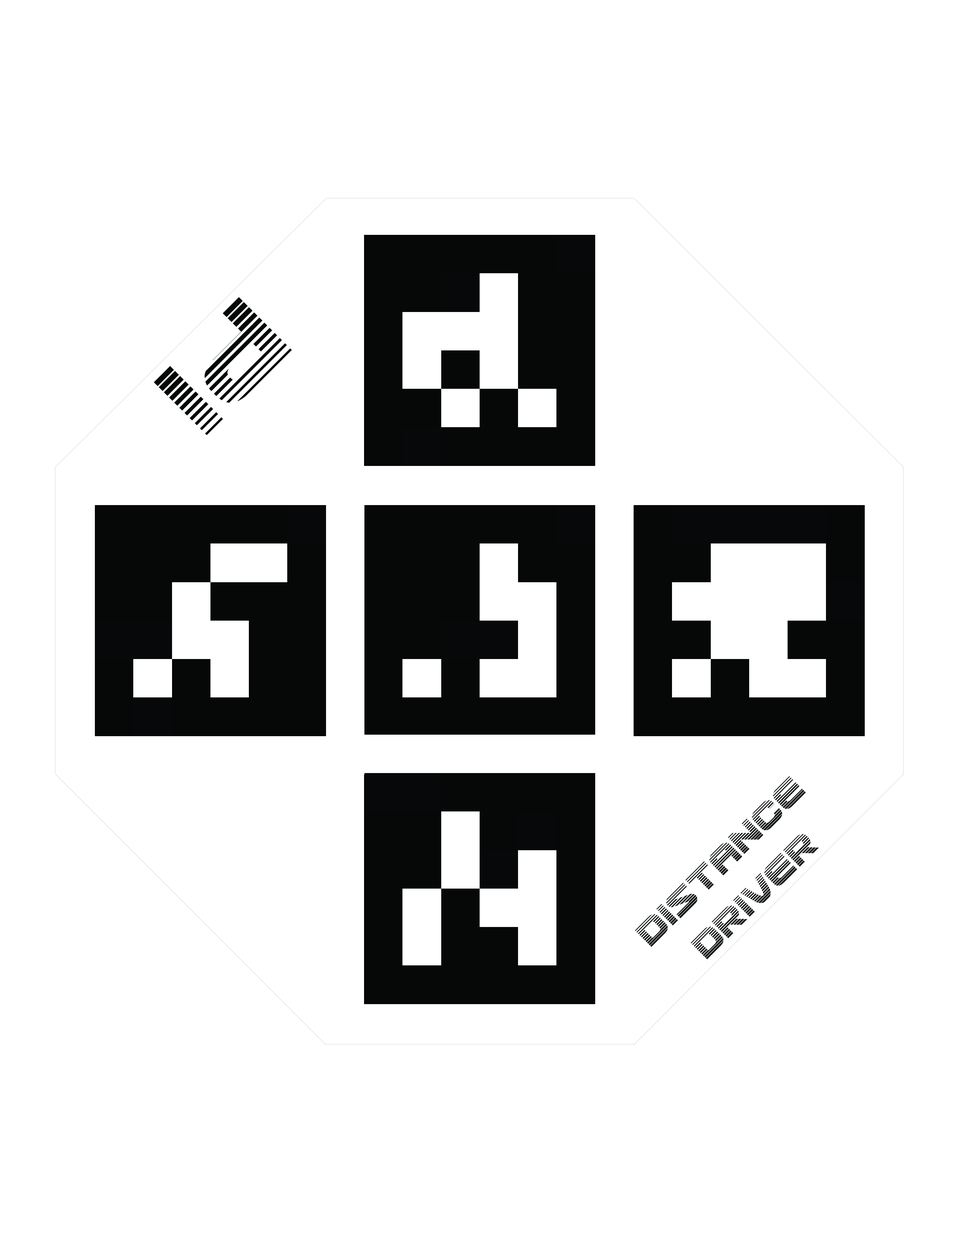
<style>
.page{position:relative;width:960px;height:1242px;background:#ffffff}
.page>*{position:absolute;margin:0}
.t1{font:129.3px "UsuziGradient";color:#060808}
.t2{font:40px "UsuziGradient";color:#060808}
</style>
<div class="page">
<p class="t1" style="left:154px;top:297px;width:138px;height:138px;rotate:135deg">Pi</p>
<p class="t2" style="left:635px;top:776px;width:184px;height:184px;text-align:center;rotate:-45deg">DISTANCE<br>DRIVER</p>
</div>
